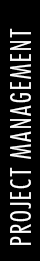
<style>
.page{position:relative;width:40px;height:261px;background:#000000}
.page>*{position:absolute;margin:0}
.t1{font:28px "FuturaStd-CondensedLight";letter-spacing:0.06em;color:#ffffff;text-transform:uppercase}
</style>
<div class="page">
<p class="t1" style="left:10px;top:28px;width:21px;height:217px;rotate:-90deg">Project Management</p>
</div>
